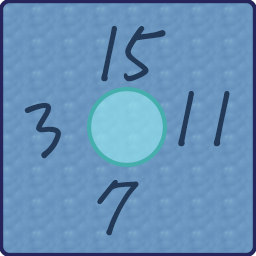
<style>
.page{position:relative;width:256px;height:256px}
.page>*{position:absolute;margin:0}
.t1{font:83.3px "DFChu-W4-WINP-BF";letter-spacing:-0.2em;color:#223957;font-weight:bold}
.t2{font:83.3px "DFChu-W4-WINP-BF";letter-spacing:0.05em;color:#223957;font-weight:bold}
</style>
<div class="page">
<p class="t1" style="left:101px;top:26px;width:65px;height:56px">15</p>
<p class="t1" style="left:178px;top:91px;width:52px;height:56px">11</p>
<p class="t2" style="left:24px;top:103px;width:37px;height:56px">3</p>
<p class="t2" style="left:97px;top:180px;width:42px;height:56px">7</p>
</div>
